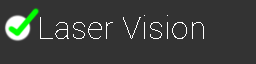
<style>
.page{position:relative;width:256px;height:64px;background:#333333}
.page>*{position:absolute;margin:0}
.t1{font:32px "Roboto-Thin";color:#ffffff}
</style>
<div class="page">
<p class="t1" style="left:40px;top:15px;width:164px;height:24px">Laser Vision</p>
</div>
